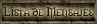
<style>
.page{position:relative;width:97px;height:24px}
.page>*{position:absolute;margin:0}
.t1{font:12px "Morpheus"}
</style>
<div class="page">
<p class="t1" style="left:3px;top:7px;width:91px;height:12px">Lista de Mensajes</p>
</div>
